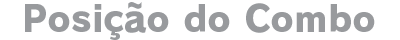
<style>
.page{position:relative;width:400px;height:40px;background:#ffffff}
.page>*{position:absolute;margin:0}
.t1{font:36px "RodinPro-EB";letter-spacing:0.003em;color:#989a9d}
</style>
<div class="page">
<p class="t1" style="left:25px;top:2px;width:350px;height:38px">Posição do Combo</p>
</div>
